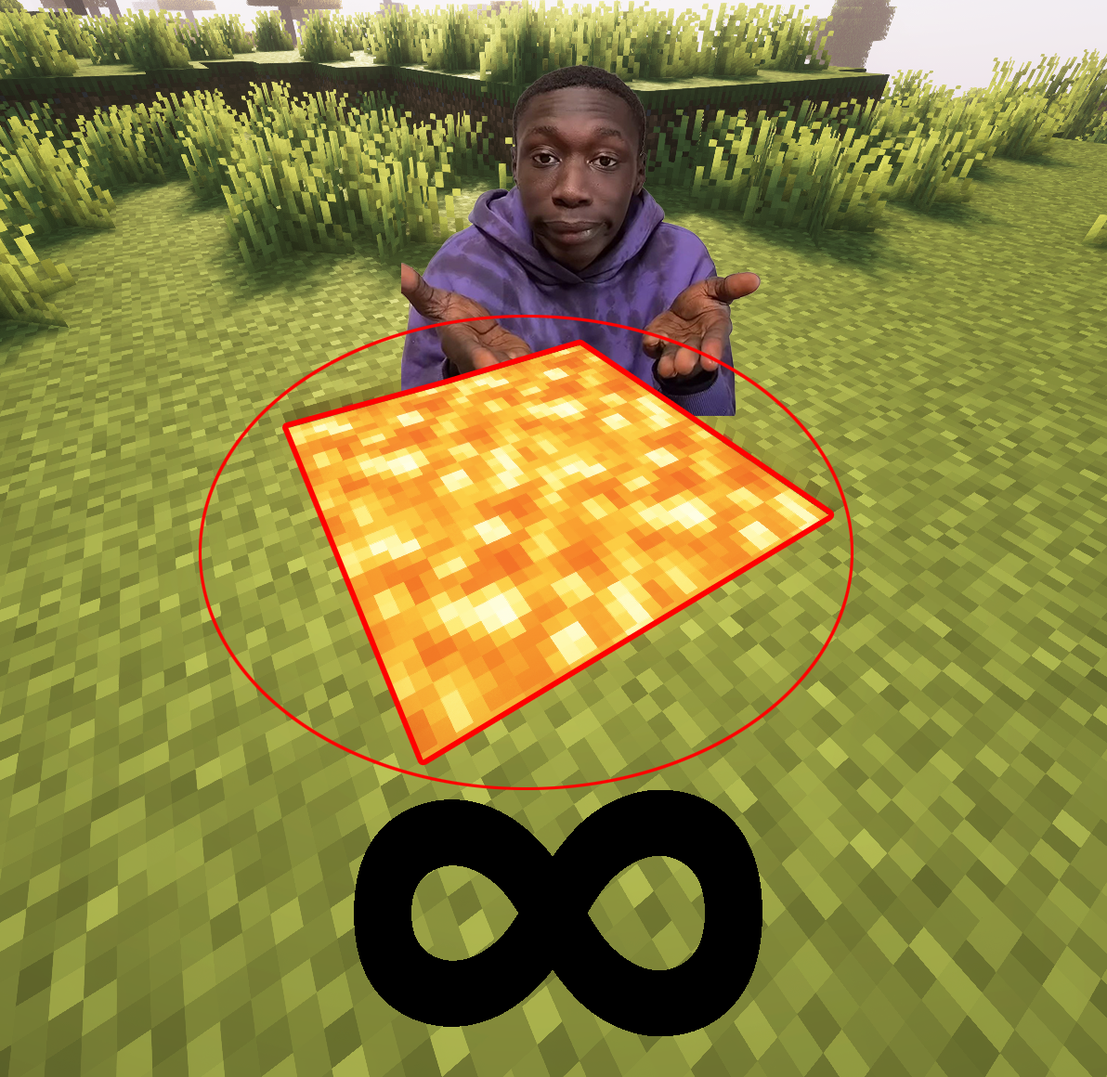
<style>
.page{position:relative;width:1107px;height:1077px}
.page>*{position:absolute;margin:0}
.t1{font:608.3px "Sarasa-Mono-Slab-SC-Bold";letter-spacing:-0.02em;color:#000000}
</style>
<div class="page">
<p class="t1" style="left:354px;top:790px;width:408px;height:246px">∞</p>
</div>
